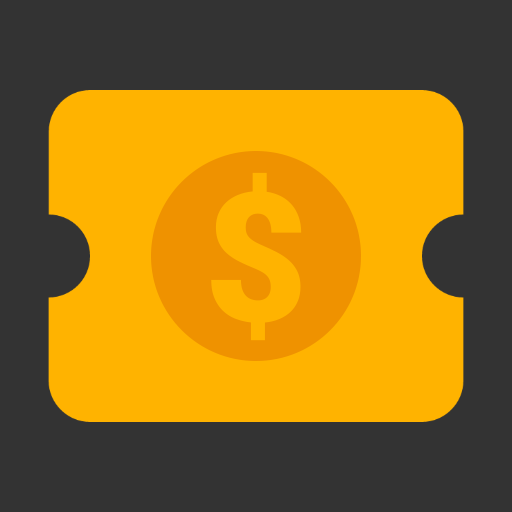
<style>
.page{position:relative;width:512px;height:512px;background:#333333}
.page>*{position:absolute;margin:0}
.t1{font:180px "Roboto-Black";color:#ffb300}
</style>
<div class="page">
<p class="t1" style="left:211px;top:172px;width:91px;height:169px">$</p>
</div>
